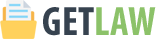
<style>
.page{position:relative;width:156px;height:39px;background:#ffffff}
.page>*{position:absolute;margin:0}
.t1{font:41px "MyriadPro-BoldCond";color:#36424f}
.t2{font:41px "MyriadPro-BoldCond";color:#8cc269}
</style>
<div class="page">
<p class="t1" style="left:43px;top:7px;width:113px;height:29px">GET<span class="t2">LAW</span></p>
</div>
